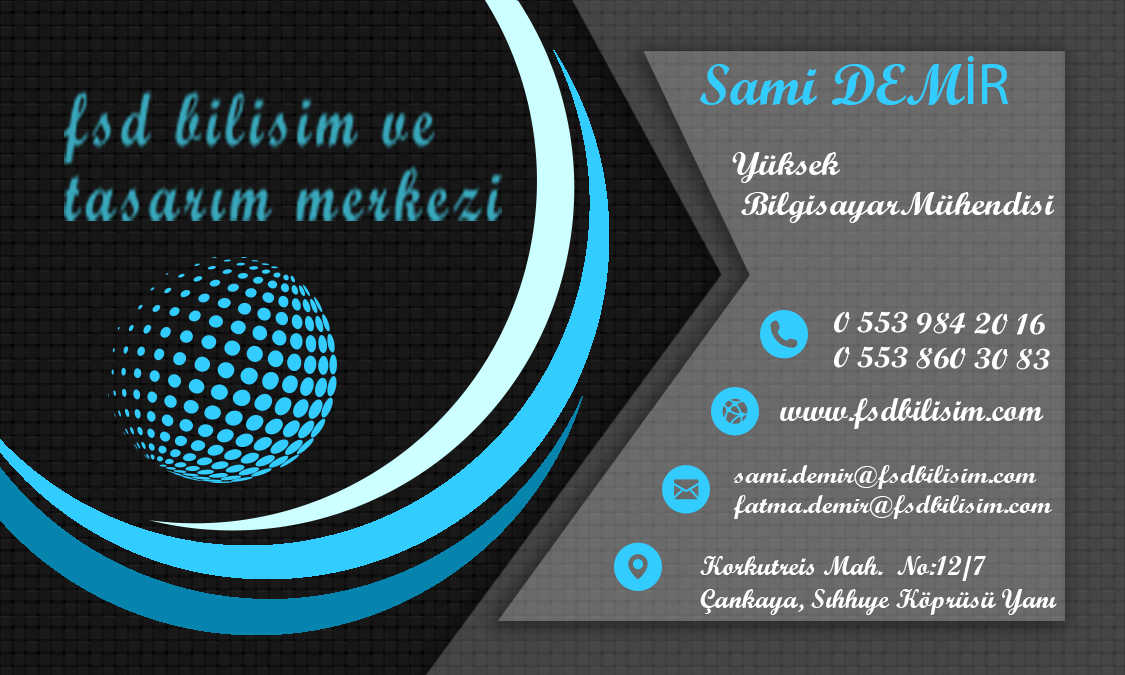
<style>
.page{position:relative;width:1125px;height:675px}
.page>*{position:absolute;margin:0}
.t1{font:58.3px "ScriptMTBold";color:#33ccff}
.t2{font:58.3px "MyriadPro-Regular";color:#33ccff}
.t3{font:33.3px "ScriptMTBold";color:#ffffff;scale:1.09 1}
.t4{font:29.2px "ScriptMTBold";color:#ffffff;scale:1.11 1}
.t5{font:33.3px "ScriptMTBold";color:#ffffff}
.t6{font:25px "ScriptMTBold";color:#ffffff;scale:1.12 1}
.t7{font:27.1px "ScriptMTBold";color:#ffffff}
</style>
<div class="page">
<p class="t1" style="left:700px;top:56px;width:309px;height:49px">Sami DEM<span class="t2">İR</span></p>
<p class="t3" style="left:732px;top:152px;width:322px;height:71px">Yüksek<br> BilgisayarMühendisi</p>
<p class="t4" style="left:834px;top:311px;width:216px;height:59px;rotate:1deg">0 553 984 20 16 <br>0 553 860 30 83</p>
<p class="t5" style="left:780px;top:398px;width:264px;height:31px">www.fsdbilisim.com</p>
<p class="t6" style="left:734px;top:465px;width:318px;height:54px">sami.demir@fsdbilisim.com<br>fatma.demir@fsdbilisim.com</p>
<p class="t7" style="left:700px;top:556px;width:357px;height:59px">Korkutreis Mah.  No:12/7 <br>Çankaya, Sıhhıye Köprüsü Yanı</p>
</div>
